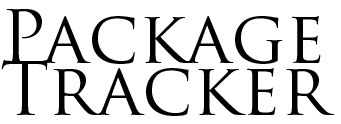
<style>
.page{position:relative;width:341px;height:124px;background:#ffffff}
.page>*{position:absolute;margin:0}
.t1{font:72px/52px "TrajanPro-Regular";color:#000000}
</style>
<div class="page">
<p class="t1" style="left:1px;top:9px;width:334px;height:107px">Package<br>Tracker</p>
</div>
